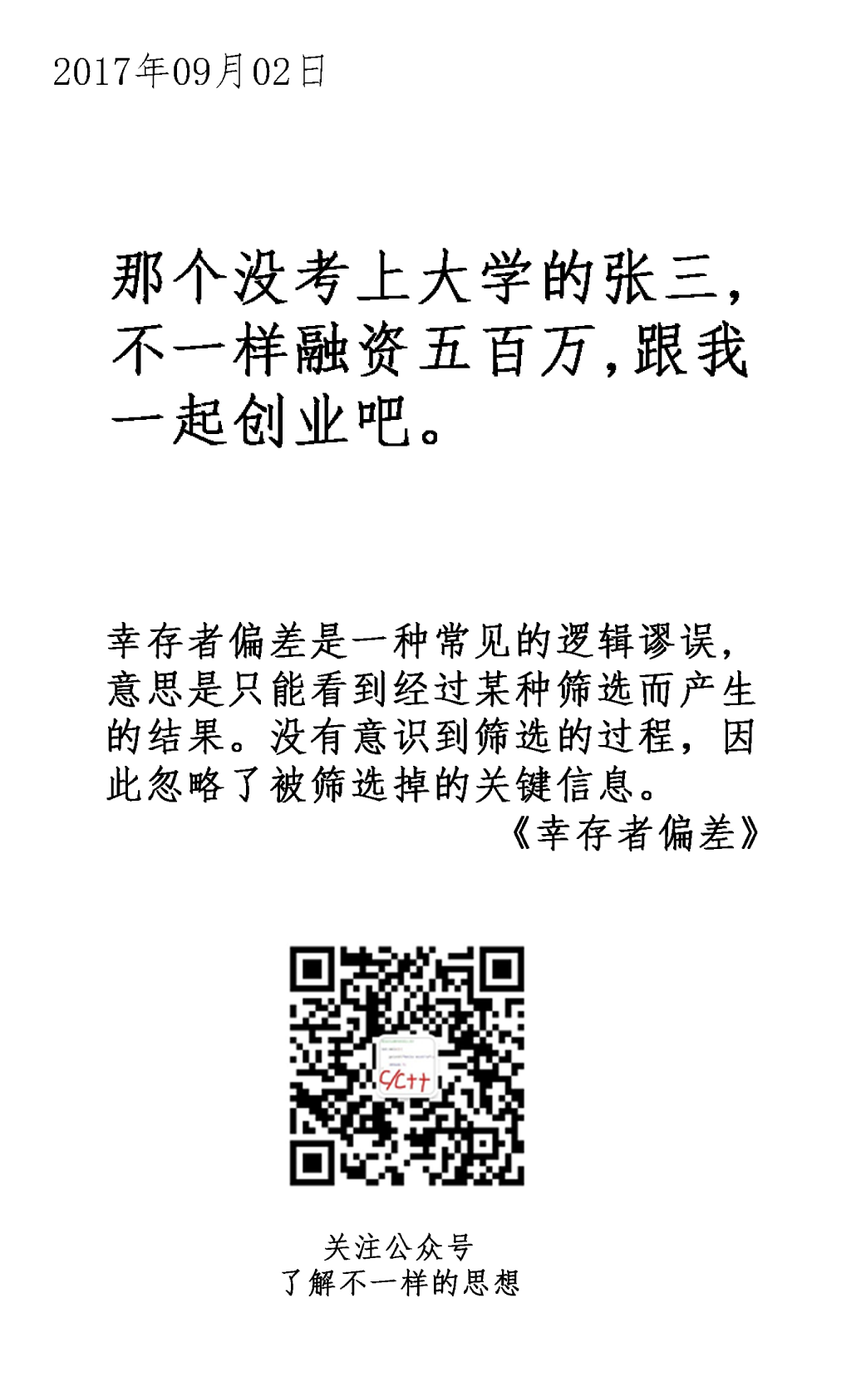
<style>
.page{position:relative;width:866px;height:1377px;background:#ffffff}
.page>*{position:absolute;margin:0}
.t1{font:39.9px "·ÂËÎ-Regular";color:#000000}
.t2{font:59.9px "·ÂËÎ-Regular";letter-spacing:0.025em;color:#000000;font-weight:bold}
.t3{font:39.9px "·ÂËÎ-Regular";letter-spacing:0.025em;color:#000000;font-weight:bold}
.t4{font:29.9px "·ÂËÎ-Regular";letter-spacing:0.025em;color:#000000;font-weight:bold}
</style>
<div class="page">
<p class="t1" style="left:54px;top:52px;width:270px;height:37px">2017年09月02日</p>
<p class="t2" style="left:111px;top:248px;width:637px;height:200px">那个没考上大学的张三,不一样融资五百万,跟我一起创业吧。</p>
<p class="t3" style="left:106px;top:621px;width:652px;height:230px">幸存者偏差是一种常见的逻辑谬误,意思是只能看到经过某种筛选而产生的结果。没有意识到筛选的过程，因此忽略了被筛选掉的关键信息。<br>《幸存者偏差》</p>
<p class="t4" style="left:282px;top:1232px;width:238px;height:64px;text-align:center">关注公众号<br>了解不一样的思想</p>
</div>
